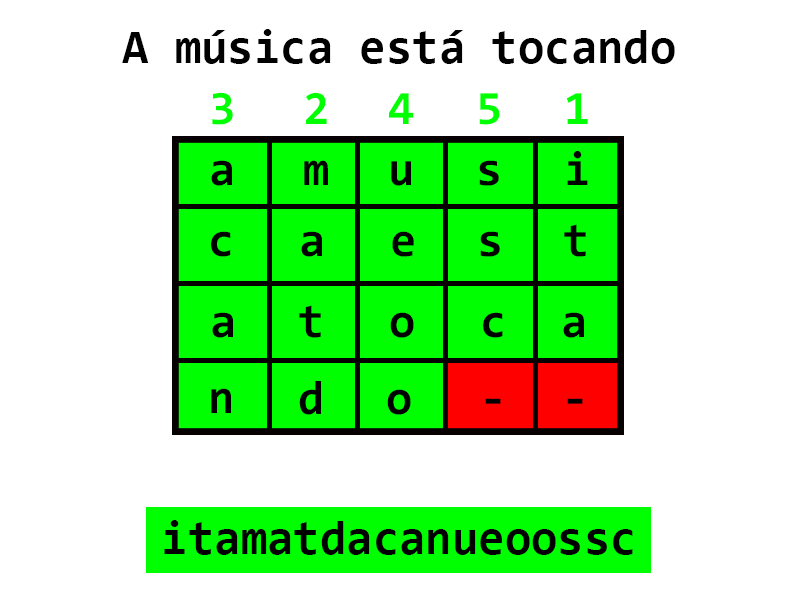
<style>
.page{position:relative;width:800px;height:600px;background:#ffffff}
.page>*{position:absolute;margin:0}
.t1{font:48px "Consolas-Bold";color:#000000}
.t2{font:48.1px "Consolas-Bold";color:#00ff00}
.t3{font:48.1px "Consolas-Bold";color:#000000}
</style>
<div class="page">
<p class="t1" style="left:122px;top:29px;width:553px;height:35px">A música está tocando</p>
<p class="t2" style="left:212px;top:92px;width:21px;height:33px">3</p>
<p class="t2" style="left:306px;top:92px;width:21px;height:32px">2</p>
<p class="t2" style="left:389px;top:93px;width:25px;height:31px">4</p>
<p class="t2" style="left:479px;top:93px;width:21px;height:32px">5</p>
<p class="t2" style="left:566px;top:93px;width:22px;height:31px">1</p>
<p class="t3" style="left:211px;top:160px;width:21px;height:26px">a</p>
<p class="t3" style="left:304px;top:160px;width:24px;height:25px">m</p>
<p class="t3" style="left:391px;top:161px;width:20px;height:25px">u</p>
<p class="t3" style="left:479px;top:160px;width:20px;height:26px">s</p>
<p class="t3" style="left:567px;top:151px;width:21px;height:34px">i</p>
<p class="t3" style="left:211px;top:231px;width:20px;height:26px">c</p>
<p class="t3" style="left:301px;top:231px;width:21px;height:26px">a</p>
<p class="t3" style="left:392px;top:231px;width:22px;height:26px">e</p>
<p class="t3" style="left:480px;top:231px;width:20px;height:26px">s</p>
<p class="t3" style="left:564px;top:224px;width:22px;height:33px">t</p>
<p class="t3" style="left:299px;top:305px;width:22px;height:33px">t</p>
<p class="t3" style="left:212px;top:312px;width:21px;height:26px">a</p>
<p class="t3" style="left:390px;top:312px;width:24px;height:26px">o</p>
<p class="t3" style="left:483px;top:312px;width:20px;height:26px">c</p>
<p class="t3" style="left:563px;top:312px;width:21px;height:26px">a</p>
<p class="t3" style="left:211px;top:388px;width:20px;height:25px">n</p>
<p class="t3" style="left:299px;top:381px;width:22px;height:34px">d</p>
<p class="t3" style="left:387px;top:389px;width:24px;height:26px">o</p>
<p class="t3" style="left:485px;top:398px;width:16px;height:6px">-</p>
<p class="t3" style="left:567px;top:398px;width:16px;height:6px">-</p>
<p class="t1" style="left:164px;top:520px;width:469px;height:35px">itamatdacanueoossc</p>
</div>
